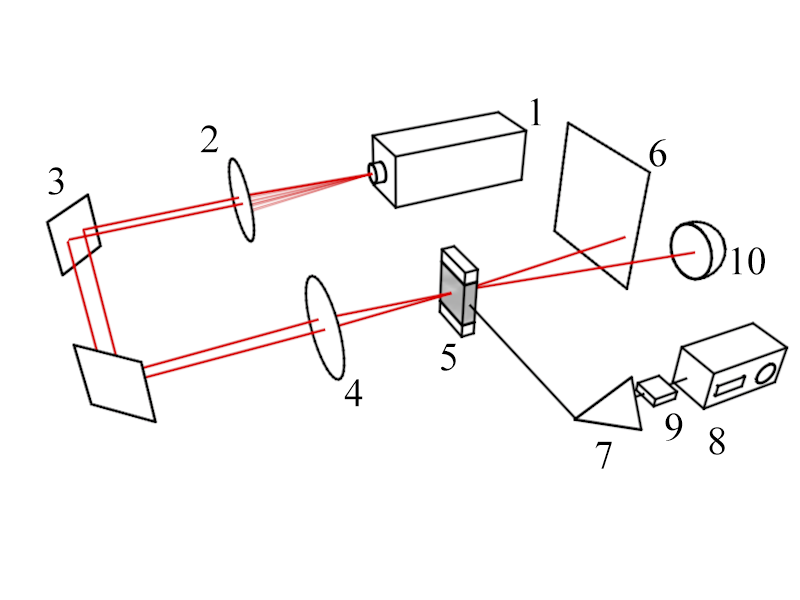
<style>
.page{position:relative;width:800px;height:600px;background:#ffffff}
.page>*{position:absolute;margin:0}
.t1{font:68.1px "TimesNewRomanPSMT";color:#000000}
</style>
<div class="page">
<p class="t1" style="left:530px;top:98px;width:11px;height:28px">1</p>
<p class="t1" style="left:200px;top:125px;width:19px;height:28px">2</p>
<p class="t1" style="left:649px;top:139px;width:18px;height:28px">6</p>
<p class="t1" style="left:48px;top:167px;width:16px;height:28px">3</p>
<p class="t1" style="left:731px;top:247px;width:34px;height:28px">10</p>
<p class="t1" style="left:441px;top:343px;width:15px;height:28px">5</p>
<p class="t1" style="left:344px;top:379px;width:19px;height:28px">4</p>
<p class="t1" style="left:665px;top:413px;width:18px;height:28px">9</p>
<p class="t1" style="left:709px;top:427px;width:16px;height:28px">8</p>
<p class="t1" style="left:595px;top:441px;width:17px;height:28px">7</p>
</div>
